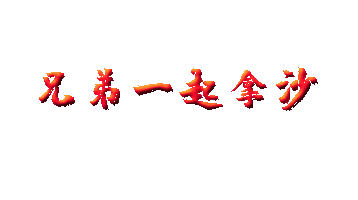
<style>
.page{position:relative;width:358px;height:200px;background:#ffffff}
.page>*{position:absolute;margin:0}
.t1{font:48px "24--Regular"}
</style>
<div class="page">
<p class="t1" style="left:39px;top:67px;width:279px;height:44px">兄弟一起拿沙</p>
</div>
